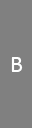
<style>
.page{position:relative;width:32px;height:128px;background:#808080}
.page>*{position:absolute;margin:0}
.t1{font:24px "Calibri";color:#feffff}
</style>
<div class="page">
<p class="t1" style="left:11px;top:57px;width:12px;height:15px">B</p>
</div>
